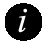
<style>
.page{position:relative;width:46px;height:45px;background:#000000}
.page>*{position:absolute;margin:0}
.t1{font:36px "TimesNewRomanPS-ItalicMT";color:#fefdfd}
</style>
<div class="page">
<p class="t1" style="left:18px;top:8px;width:10px;height:25px">i</p>
</div>
